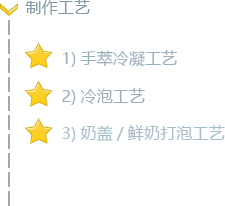
<style>
.page{position:relative;width:225px;height:206px;background:#ffffff}
.page>*{position:absolute;margin:0}
.t1{font:16px "MicrosoftYaHei";letter-spacing:0.01em;color:#8298a3}
.t2{font:16px "MicrosoftYaHei";letter-spacing:0.01em;color:#9ab1bd}
.t3{font:16px "MicrosoftYaHei";letter-spacing:0.01em;color:#a5bdca}
</style>
<div class="page">
<p class="t1" style="left:25px;top:0px;width:65px;height:15px">制作工艺</p>
<p class="t2" style="left:63px;top:50px;width:114px;height:17px">1)手萃冷凝工艺</p>
<p class="t2" style="left:62px;top:88px;width:83px;height:17px">2)冷泡工艺</p>
<p class="t3" style="left:62px;top:125px;width:163px;height:17px">3)奶盖/鲜奶打泡工艺</p>
</div>
